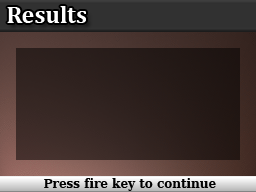
<style>
.page{position:relative;width:256px;height:192px}
.page>*{position:absolute;margin:0}
.t1{font:24px "Cambria-Bold";color:#ffffff}
.t2{font:12px "BitstreamVeraSerif-Bold";color:#000000}
</style>
<div class="page">
<p class="t1" style="left:7px;top:6px;width:79px;height:17px">Results</p>
<p class="t2" style="left:44px;top:178px;width:172px;height:13px">Press fire key to continue</p>
</div>
